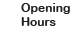
<style>
.page{position:relative;width:80px;height:30px;background:#ffffff}
.page>*{position:absolute;margin:0}
.t1{font:12px "ArialRoundedMTBold";color:#202021}
</style>
<div class="page">
<p class="t1" style="left:21px;top:3px;width:49px;height:23px">Opening<br>Hours</p>
</div>
